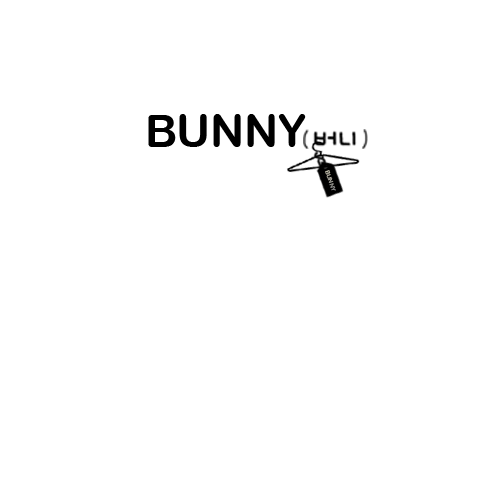
<style>
.page{position:relative;width:500px;height:500px;background:#ffffff}
.page>*{position:absolute;margin:0}
.t1{font:45px "ArialRoundedMTBold";color:#000000}
.t2{font:6px "ArialRoundedMTBold"}
</style>
<div class="page">
<p class="t1" style="left:148px;top:114px;width:158px;height:33px">BUNNY</p>
<p class="t2" style="left:325px;top:170px;width:11px;height:21px;rotate:71deg">BUNNY</p>
</div>
